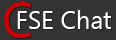
<style>
.page{position:relative;width:116px;height:40px;background:#333333}
.page>*{position:absolute;margin:0}
.t1{font:50px "SegoeUI";color:#cc0000}
.t2{font:25px "SegoeUI";color:#ffffff}
</style>
<div class="page">
<p class="t1" style="left:4px;top:2px;width:27px;height:36px">C</p>
<p class="t2" style="left:17px;top:10px;width:94px;height:19px">FSE Chat</p>
</div>
